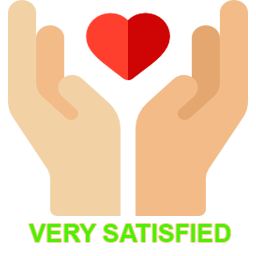
<style>
.page{position:relative;width:256px;height:256px;background:#ffffff}
.page>*{position:absolute;margin:0}
.t1{font:25px "Arial-BoldMT";color:#4af200}
</style>
<div class="page">
<p class="t1" style="left:29px;top:224px;width:202px;height:18px">VERY SATISFIED</p>
</div>
